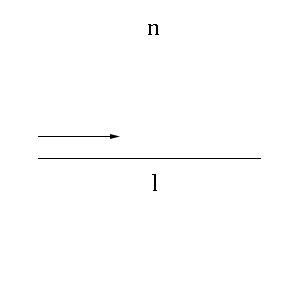
<style>
.page{position:relative;width:300px;height:300px;background:#ffffff}
.page>*{position:absolute;margin:0}
.t1{font:24px "CambriaMath";color:#000000}
</style>
<div class="page">
<p class="t1" style="left:148px;top:24px;width:11px;height:11px">n</p>
<p class="t1" style="left:152px;top:174px;width:5px;height:17px">l</p>
</div>
